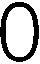
<style>
.page{position:relative;width:40px;height:64px;background:#ffffff}
.page>*{position:absolute;margin:0}
.t1{font:74px "OPPOSans-R";color:#000000}
</style>
<div class="page">
<p class="t1" style="left:0px;top:2px;width:39px;height:60px">0</p>
</div>
